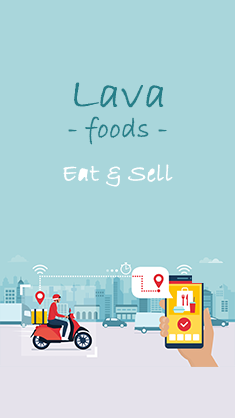
<style>
.page{position:relative;width:235px;height:418px;background:#a9d6db}
.page>*{position:absolute;margin:0}
.t1{font:27.5px/30.3px "BradleyHandITC";color:#257e88;font-weight:bold}
.t2{font:44px/30.3px "BradleyHandITC";color:#257e88;font-weight:bold}
</style>
<div class="page">
<p class="t1" style="left:68px;top:82px;width:99px;height:63px;text-align:center"><span class="t2">  Lava<br></span>   - foods -</p>
</div>
